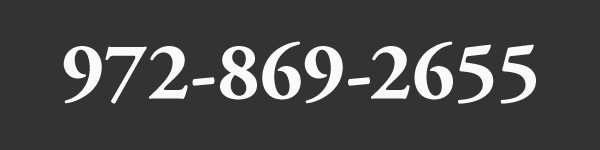
<style>
.page{position:relative;width:600px;height:150px;background:#333333}
.page>*{position:absolute;margin:0}
.t1{font:82.3px "AGaramondPro-Bold";color:#fafafa}
.t2{font:82.3px "AGaramondPro-Bold";letter-spacing:-0.04em;color:#fafafa}
</style>
<div class="page">
<p class="t1" style="left:63px;top:41px;width:473px;height:63px">972-869<span class="t2">-</span>2655</p>
</div>
